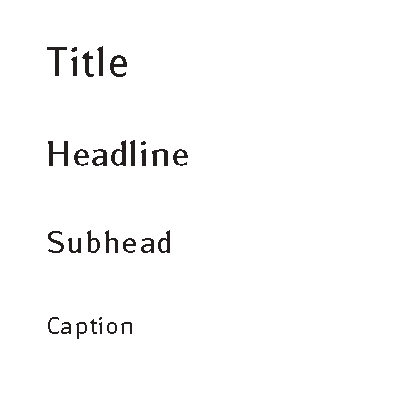
<style>
.page{position:relative;width:400px;height:400px;background:#ffffff}
.page>*{position:absolute;margin:0}
.t1{font:40px "SusanBook-Regular";letter-spacing:0.012em;color:#221f1e}
.t2{font:34px "SusanBook-Regular";letter-spacing:0.012em;color:#221f1e}
.t3{font:30px "SusanBook-Regular";letter-spacing:0.012em;color:#221f1e}
.t4{font:24px "SusanBook-Regular";letter-spacing:0.012em;color:#221f1e}
</style>
<div class="page">
<p class="t1" style="left:47px;top:46px;width:80px;height:31px">Title</p>
<p class="t2" style="left:48px;top:140px;width:140px;height:26px">Headline</p>
<p class="t3" style="left:48px;top:230px;width:122px;height:23px">Subhead</p>
<p class="t4" style="left:48px;top:317px;width:84px;height:22px">Caption</p>
</div>
